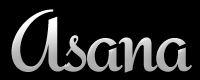
<style>
.page{position:relative;width:200px;height:80px;background:#000000}
.page>*{position:absolute;margin:0}
.t1{font:87.4px "Redressed";letter-spacing:-0.05em;color:#bababa}
</style>
<div class="page">
<p class="t1" style="left:11px;top:9px;width:181px;height:64px">Asana</p>
</div>
